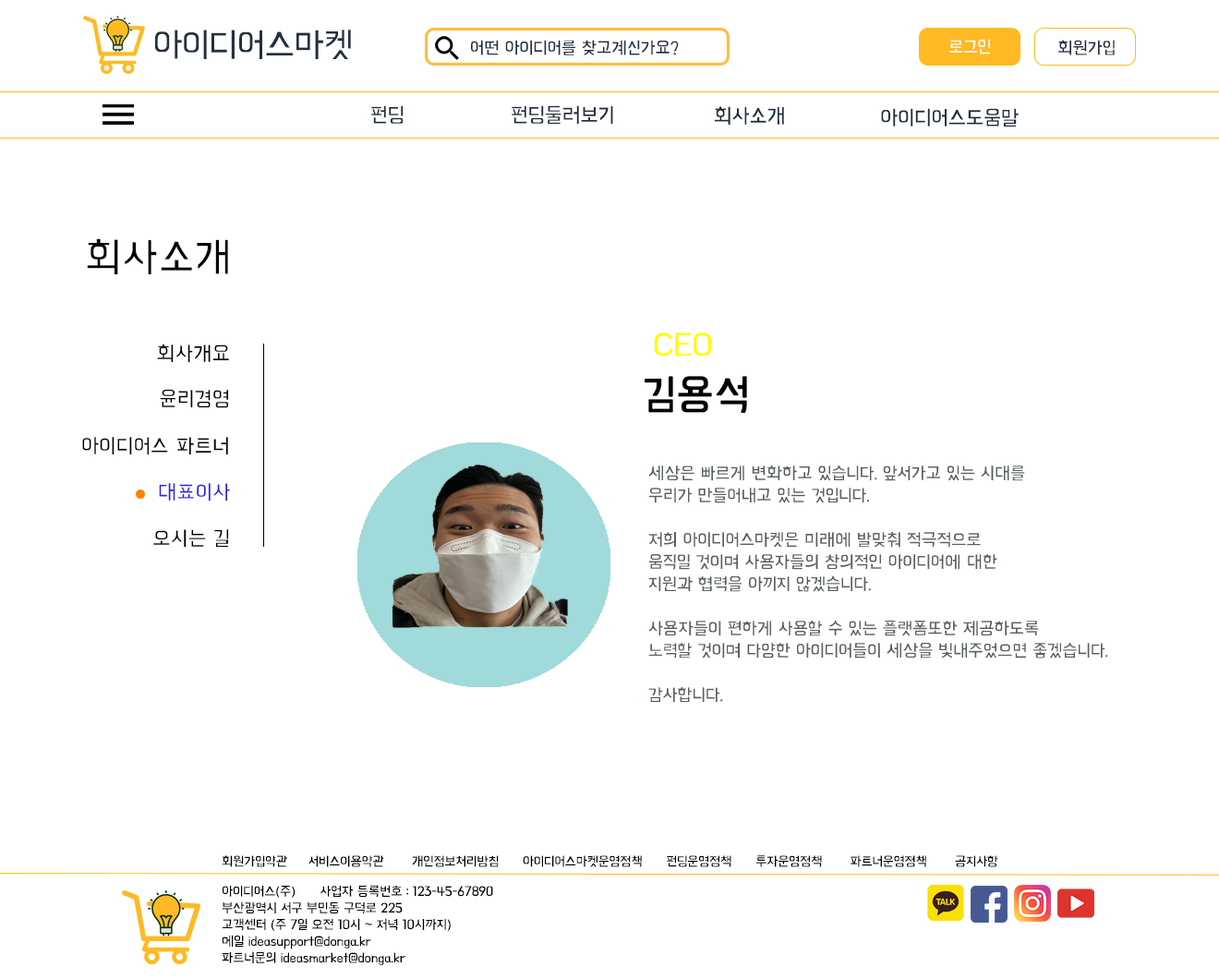
<style>
.page{position:relative;width:1219px;height:979px;background:#ffffff}
.page>*{position:absolute;margin:0}
.t1{font:36.9px "BMHANNAAir";letter-spacing:-0.03em;color:#233041}
.t2{font:18.5px "BMHANNAAir";letter-spacing:-0.02em;color:#202d3e}
.t3{font:18.5px "BMHANNAAir";letter-spacing:-0.02em;color:#ffffff}
.t4{font:22.2px "BMHANNAAir";letter-spacing:-0.02em;color:#202d3e}
.t5{font:44.3px "BMHANNAAir";color:#000000}
.t6{font:33.2px "BMHANNAAir";letter-spacing:-0.02em;color:#fffc00}
.t7{font:33.2px "BMHANNAAir";letter-spacing:-0.02em;color:#000000}
.t8{font:44.3px "BMHANNAAir";letter-spacing:-0.02em;color:#000000;font-weight:bold}
.t9{font:22.2px "BMHANNAAir";color:#000000}
.t10{font:18.5px "BMHANNAAir";letter-spacing:-0.02em;color:#596063}
.t11{font:22.2px "BMHANNAAir";color:#2f22e3}
.t12{font:13.8px "BMHANNAAir";letter-spacing:-0.025em;color:#000000}
.t13{font:13.8px "BMHANNAAir";letter-spacing:-0.02em;color:#000000}
</style>
<div class="page">
<p class="t1" style="left:155px;top:30px;width:196px;height:29px">아이디어스마켓</p>
<p class="t2" style="left:471px;top:40px;width:208px;height:15px">어떤 아이디어를 찾고계신가요?</p>
<p class="t3" style="left:949px;top:39px;width:41px;height:15px">로그인</p>
<p class="t2" style="left:1058px;top:40px;width:56px;height:15px">회원가입</p>
<p class="t4" style="left:371px;top:105px;width:32px;height:19px">펀딩</p>
<p class="t4" style="left:511px;top:105px;width:102px;height:19px">펀딩둘러보기</p>
<p class="t4" style="left:715px;top:106px;width:69px;height:19px">회사소개</p>
<p class="t4" style="left:881px;top:108px;width:137px;height:18px">아이디어스도움말</p>
<p class="t5" style="left:87px;top:238px;width:141px;height:36px">회사소개</p>
<p class="t6" style="left:644px;top:332px;width:103px;height:81px"><span class="t7"> </span>CEO<br><span class="t8">김용석</span></p>
<p class="t9" style="left:157px;top:343px;width:72px;height:20px">회사개요</p>
<p class="t9" style="left:160px;top:389px;width:69px;height:19px">윤리경영</p>
<p class="t9" style="left:82px;top:437px;width:146px;height:18px">아이디어스 파트너</p>
<p class="t10" style="left:648px;top:465px;width:460px;height:237px">세상은 빠르게 변화하고 있습니다. 앞서가고 있는 시대를<br>우리가 만들어내고 있는 것입니다.  <br><br>저희 아이디어스마켓은 미래에 발맞춰 적극적으로<br>움직일 것이며 사용자들의 창의적인 아이디어에 대한 <br>지원과 협력을 아끼지 않겠습니다. <br><br>사용자들이 편하게 사용할 수 있는 플랫폼또한 제공하도록 <br>노력할 것이며 다양한 아이디어들이 세상을 빛내주었으면 좋겠습니다.<br><br>감사합니다.</p>
<p class="t11" style="left:159px;top:483px;width:71px;height:18px">대표이사</p>
<p class="t9" style="left:153px;top:529px;width:76px;height:18px">오시는 길</p>
<p class="t12" style="left:222px;top:855px;width:776px;height:12px">회원가입약관       서비스이용약관       개인정보처리방침      아이디어스마켓운영정책      펀딩운영정책      투자운영정책       파트너운영정책       공지사항</p>
<p class="t13" style="left:222px;top:884px;width:271px;height:81px">아이디어스(주)      사업자 등록번호 : 123-45-67890  <br>부산광역시 서구 부민동 구덕로 225<br>고객센터 (주 7일 오전 10시 ~ 저녁 10시까지)<br>메일 ideasupport@donga.kr<br>파트너문의 ideasmarket@donga.kr</p>
</div>
